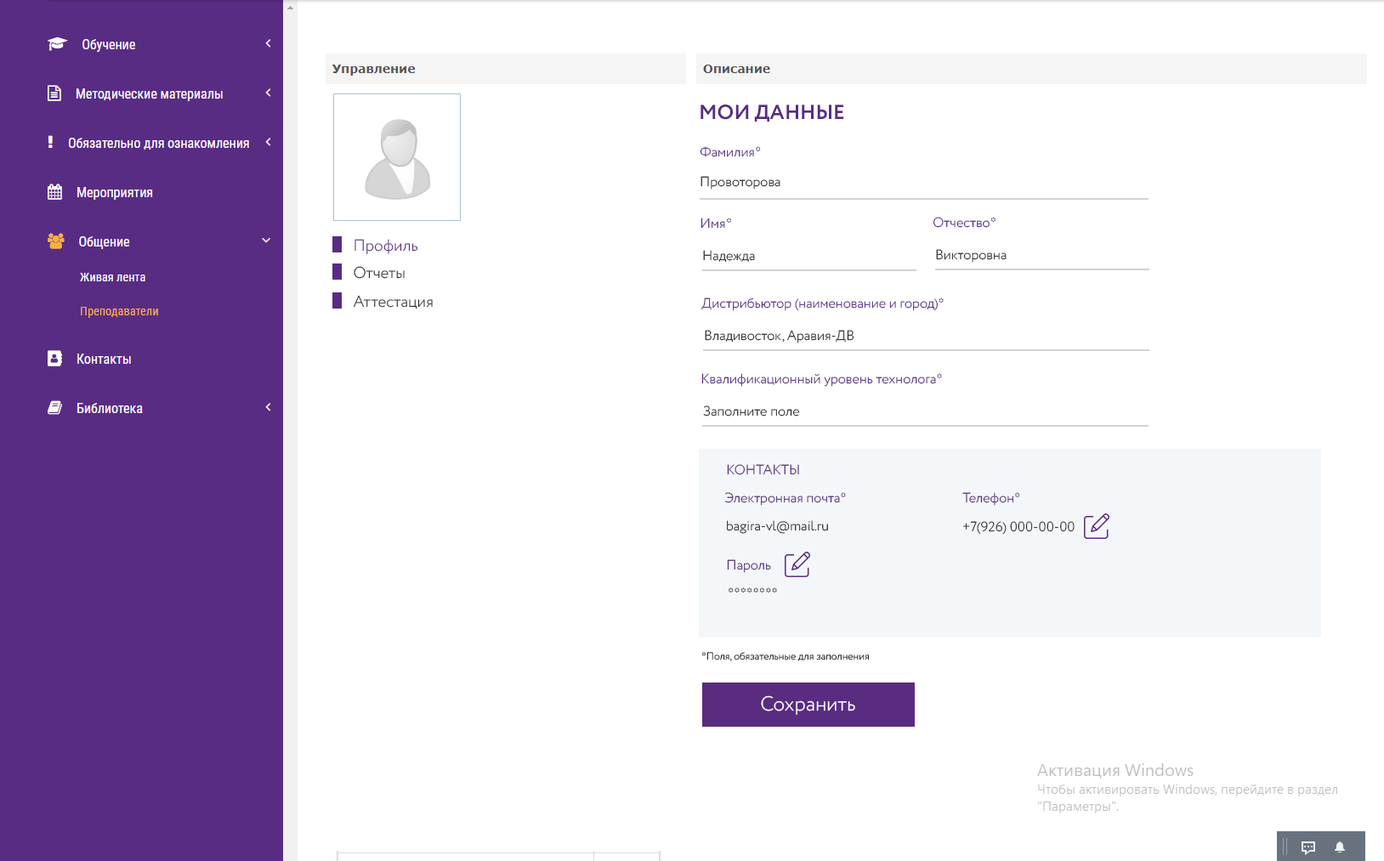
<style>
.page{position:relative;width:1384px;height:861px;background:#ffffff}
.page>*{position:absolute;margin:0}
.t1{font:20.4px "Circe-Bold";color:#592c82;text-transform:uppercase}
.t2{font:13.6px "Circe-Light";color:#592c82}
.t3{font:13.6px "Circe-Light";color:#272727}
.t4{font:15.9px "Circe-Light";color:#592c82}
.t5{font:15.9px "Circe-Light";color:#272727}
.t6{font:13.6px "Circe-Light";color:#592c82;text-transform:uppercase}
.t7{font:13.6px "Circe-Light"}
.t8{font:10.2px "Circe-Light";color:#272727}
.t9{font:20.4px "Circe-Light";color:#ffffff}
</style>
<div class="page">
<p class="t1" style="left:701px;top:105px;width:143px;height:17px">Мои Данные</p>
<p class="t2" style="left:700px;top:146px;width:61px;height:11px">Фамилия*</p>
<p class="t3" style="left:701px;top:176px;width:80px;height:14px">Провоторова</p>
<p class="t2" style="left:701px;top:218px;width:30px;height:11px">Имя*</p>
<p class="t2" style="left:933px;top:217px;width:63px;height:11px">Отчество*</p>
<p class="t4" style="left:355px;top:239px;width:63px;height:15px">Профиль</p>
<p class="t3" style="left:703px;top:250px;width:52px;height:12px">Надежда</p>
<p class="t3" style="left:936px;top:249px;width:71px;height:14px">Викторовна</p>
<p class="t5" style="left:354px;top:266px;width:51px;height:13px">Отчеты</p>
<p class="t5" style="left:353px;top:295px;width:80px;height:15px">Аттестация</p>
<p class="t2" style="left:702px;top:298px;width:242px;height:13px">Дистрибьютор (наименование и город)*</p>
<p class="t3" style="left:705px;top:330px;width:150px;height:14px">Владивосток, Аравия-ДВ</p>
<p class="t2" style="left:702px;top:373px;width:240px;height:14px">Квалификационный уровень технолога*</p>
<p class="t3" style="left:703px;top:406px;width:97px;height:11px">Заполните поле</p>
<p class="t6" style="left:727px;top:464px;width:72px;height:11px">Контакты</p>
<p class="t2" style="left:724px;top:492px;width:122px;height:14px">Электронная почта*</p>
<p class="t2" style="left:963px;top:492px;width:57px;height:14px">Телефон*</p>
<p class="t3" style="left:727px;top:520px;width:101px;height:14px">bagira-vl@mail.ru</p>
<p class="t3" style="left:963px;top:521px;width:112px;height:14px">+7(926) 000-00-00</p>
<p class="t2" style="left:727px;top:560px;width:44px;height:13px">Пароль</p>
<p class="t7" style="left:729px;top:588px;width:48px;height:6px">********</p>
<p class="t8" style="left:702px;top:652px;width:167px;height:10px">*Поля, обязательные для заполнения</p>
<p class="t9" style="left:761px;top:696px;width:94px;height:19px">Сохранить</p>
</div>
